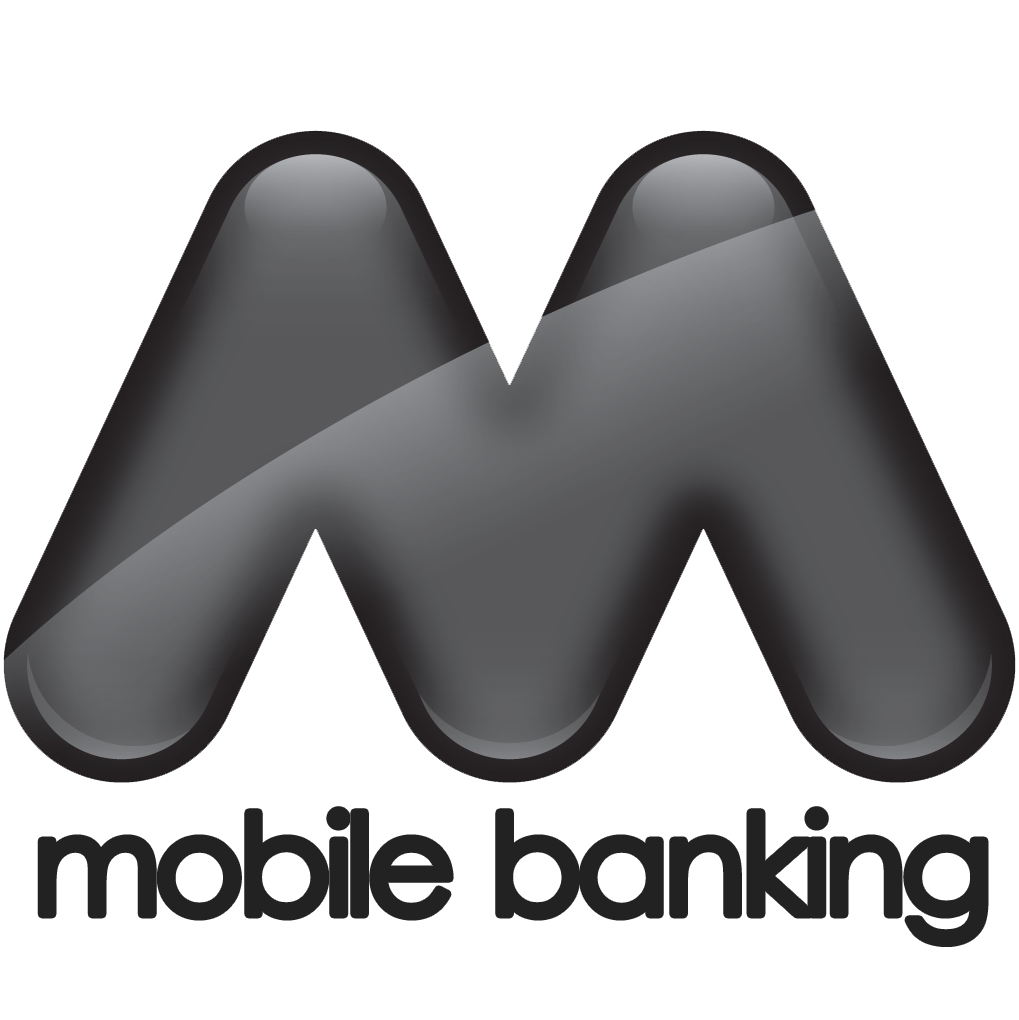
<style>
.page{position:relative;width:1019px;height:1020px;background:#ffffff}
.page>*{position:absolute;margin:0}
.t1{font:137.5px "LevenimMT";letter-spacing:-0.075em;color:#222222;font-weight:bold}
</style>
<div class="page">
<p class="t1" style="left:41px;top:810px;width:944px;height:133px">mobile banking</p>
</div>
